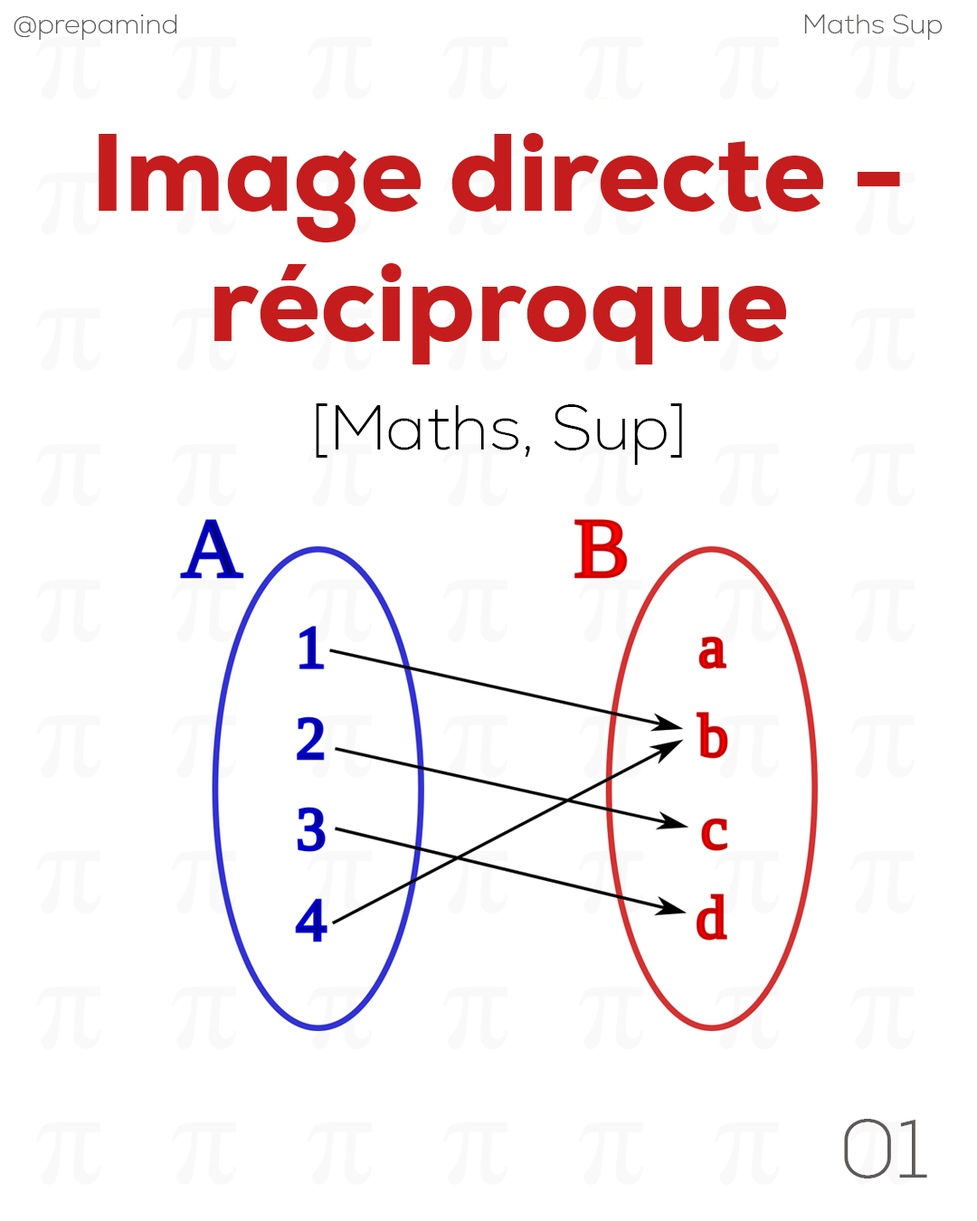
<style>
.page{position:relative;width:977px;height:1221px;background:#ffffff}
.page>*{position:absolute;margin:0}
.t1{font:27.1px "Nexa-ExtraLight";color:#5e5a5a}
.t2{font:108.5px "Nexa-Heavy";color:#c51d1d}
.t3{font:9px "Nexa-Heavy";color:#c51d1d}
.t4{font:63.3px "Nexa-ExtraLight";color:#000000}
.t5{font:81.7px "Nexa-ExtraLight";color:#5e5a5a}
</style>
<div class="page">
<p class="t1" style="left:14px;top:14px;width:163px;height:26px">@prepamind</p>
<p class="t1" style="left:804px;top:14px;width:138px;height:26px">Maths Sup</p>
<p class="t2" style="left:99px;top:133px;width:801px;height:332px;text-align:center">Image directe - réciproque<br><span class="t3"><br><br><br></span><span class="t4">[Maths, Sup]</span></p>
<p class="t5" style="left:844px;top:1119px;width:83px;height:59px">01</p>
</div>
